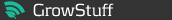
<style>
.page{position:relative;width:172px;height:20px;background:#333333}
.page>*{position:absolute;margin:0}
.t1{font:17.9px "KontrapunktLight";color:#ffffff}
</style>
<div class="page">
<p class="t1" style="left:33px;top:3px;width:81px;height:14px">GrowStuff</p>
</div>
